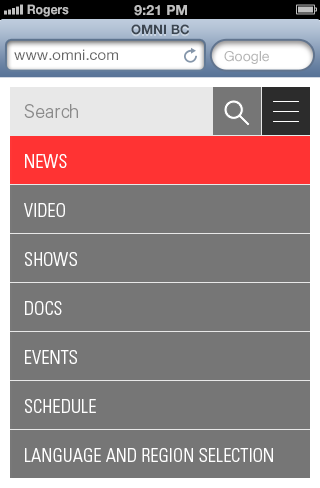
<style>
.page{position:relative;width:320px;height:488px;background:#767676}
.page>*{position:absolute;margin:0}
.t1{font:13px "HelveticaNeue-Bold";color:#bfbfbf;scale:0.95 1}
.t2{font:14px "HelveticaNeue-Bold";color:#bfbfbf;text-transform:uppercase}
.t3{font:12.9px "HelveticaNeue-Bold";letter-spacing:0.01em;color:#3c4651}
.t4{font:14.9px "HelveticaNeue";color:#666666}
.t5{font:13.9px "HelveticaNeue";color:#b3b3b3}
.t6{font:18px "Univers-Light";letter-spacing:0.01em;color:#828282}
.t7{font:18.1px/49px "Univers-CondensedLight";letter-spacing:0.01em;color:#ffffff;text-transform:uppercase}
</style>
<div class="page">
<p class="t1" style="left:27px;top:4px;width:42px;height:13px">Rogers</p>
<p class="t2" style="left:134px;top:5px;width:53px;height:11px">9:21 PM</p>
<p class="t3" style="left:131px;top:24px;width:58px;height:11px">OMNI BC</p>
<p class="t4" style="left:14px;top:49px;width:104px;height:11px">www.omni.com</p>
<p class="t5" style="left:224px;top:51px;width:45px;height:13px">Google</p>
<p class="t6" style="left:24px;top:104px;width:54px;height:14px">Search</p>
<p class="t7" style="left:24px;top:154px;width:249px;height:308px">News<br>Video     <br>Shows      <br>Docs     <br>Events     <br>Schedule<br>Language and Region Selection</p>
</div>
